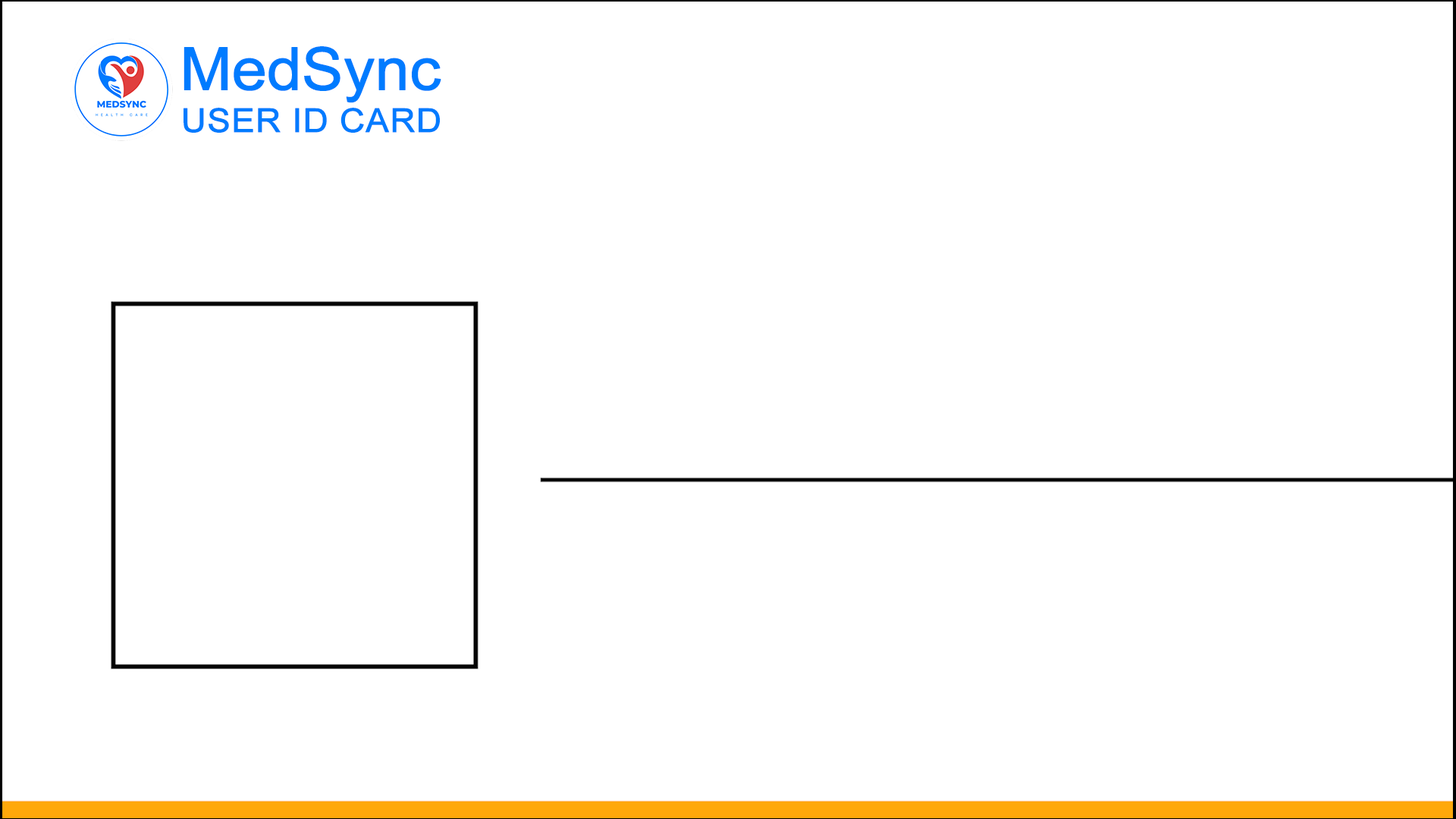
<style>
.page{position:relative;width:1456px;height:819px;background:#ffffff}
.page>*{position:absolute;margin:0}
.t1{font:59.1px "ArialMT";letter-spacing:-0.025em;color:#007bff;font-weight:bold;scale:1.06 1}
.t2{font:33.1px "ArialMT";color:#007bff;font-weight:bold;scale:1.05 1}
</style>
<div class="page">
<p class="t1" style="left:184px;top:46px;width:257px;height:57px">MedSync</p>
<p class="t2" style="left:184px;top:108px;width:256px;height:25px">USER ID CARD</p>
</div>
